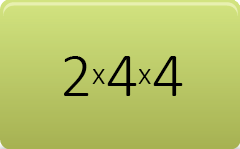
<style>
.page{position:relative;width:240px;height:149px}
.page>*{position:absolute;margin:0}
.t1{font:64px "Calibri-Light";color:#000000}
.t2{font:32px "Calibri-Light";color:#000000}
</style>
<div class="page">
<p class="t1" style="left:64px;top:56px;width:119px;height:40px">2<span class="t2">x</span>4<span class="t2">x</span>4</p>
</div>
